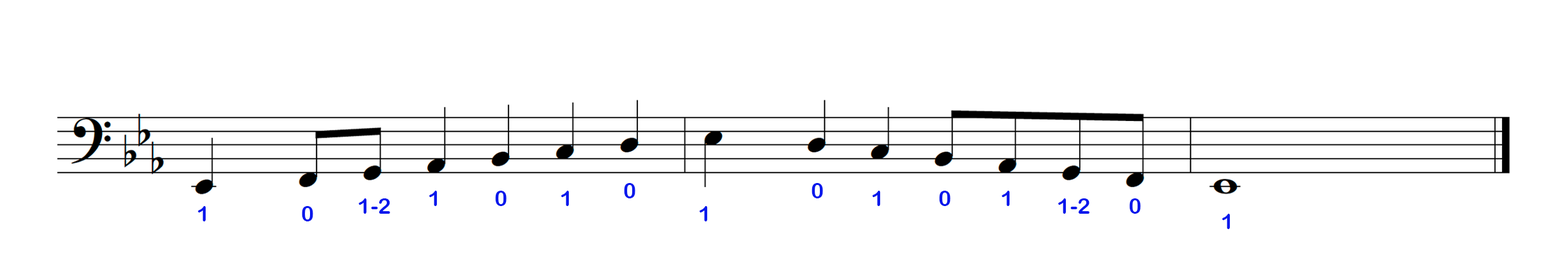
<style>
.page{position:relative;width:1568px;height:279px;background:#ffffff}
.page>*{position:absolute;margin:0}
.t1{font:21.8px "ArialRoundedMTBold";color:#0417ec}
</style>
<div class="page">
<p class="t1" style="left:624px;top:183px;width:11px;height:16px">0</p>
<p class="t1" style="left:812px;top:183px;width:11px;height:16px">0</p>
<p class="t1" style="left:429px;top:191px;width:8px;height:15px">1</p>
<p class="t1" style="left:495px;top:191px;width:12px;height:15px">0</p>
<p class="t1" style="left:561px;top:191px;width:8px;height:15px">1</p>
<p class="t1" style="left:872px;top:191px;width:9px;height:15px">1</p>
<p class="t1" style="left:939px;top:191px;width:12px;height:15px">0</p>
<p class="t1" style="left:1002px;top:191px;width:8px;height:15px">1</p>
<p class="t1" style="left:198px;top:206px;width:8px;height:16px">1</p>
<p class="t1" style="left:302px;top:206px;width:11px;height:16px">0</p>
<p class="t1" style="left:359px;top:199px;width:31px;height:15px">1-2</p>
<p class="t1" style="left:699px;top:206px;width:9px;height:16px">1</p>
<p class="t1" style="left:1058px;top:199px;width:32px;height:15px">1-2</p>
<p class="t1" style="left:1129px;top:199px;width:12px;height:15px">0</p>
<p class="t1" style="left:1222px;top:214px;width:8px;height:15px">1</p>
</div>
